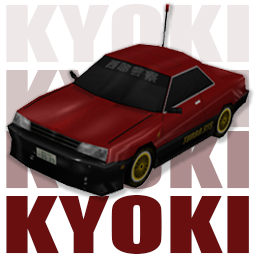
<style>
.page{position:relative;width:256px;height:256px;background:#ffffff}
.page>*{position:absolute;margin:0}
.t1{font:72px "Impact";color:#6a0f0f;scale:1.46 1}
</style>
<div class="page">
<p class="t1" style="left:6px;top:195px;width:243px;height:59px">KYOKI</p>
</div>
